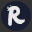
<style>
.page{position:relative;width:32px;height:32px;background:#181f32}
.page>*{position:absolute;margin:0}
.t1{font:25px "LeviBrush";color:#e8e8e8}
</style>
<div class="page">
<p class="t1" style="left:7px;top:5px;width:18px;height:21px">R</p>
</div>
